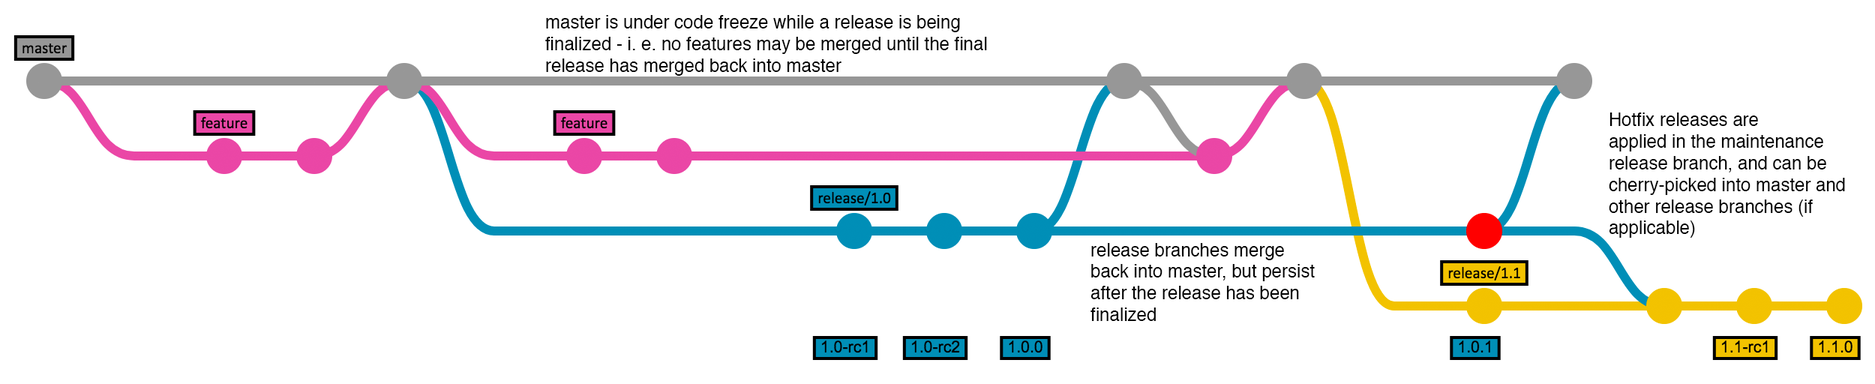
<style>
.page{position:relative;width:1875px;height:384px;background:#ffffff}
.page>*{position:absolute;margin:0}
.t1{font:9px "Helvetica";color:#000000}
.t2{font:18px "Helvetica";color:#000000}
</style>
<div class="page">
<p class="t1" style="left:545px;top:15px;width:442px;height:61px">master is under code freeze while a release is being<br>finalized - i. e. no features may be merged until the final<br>release has merged back into master</p>
<p class="t1" style="left:1609px;top:112px;width:236px;height:126px">Hotfix releases are<br>applied in the maintenance<br>release branch, and can be<br>cherry-picked into master and<br>other release branches (if<br>applicable)</p>
<p class="t2" style="left:1090px;top:243px;width:225px;height:78px">release branches merge<br>back into master, but persist<br>after the release has been<br>finalized</p>
</div>
